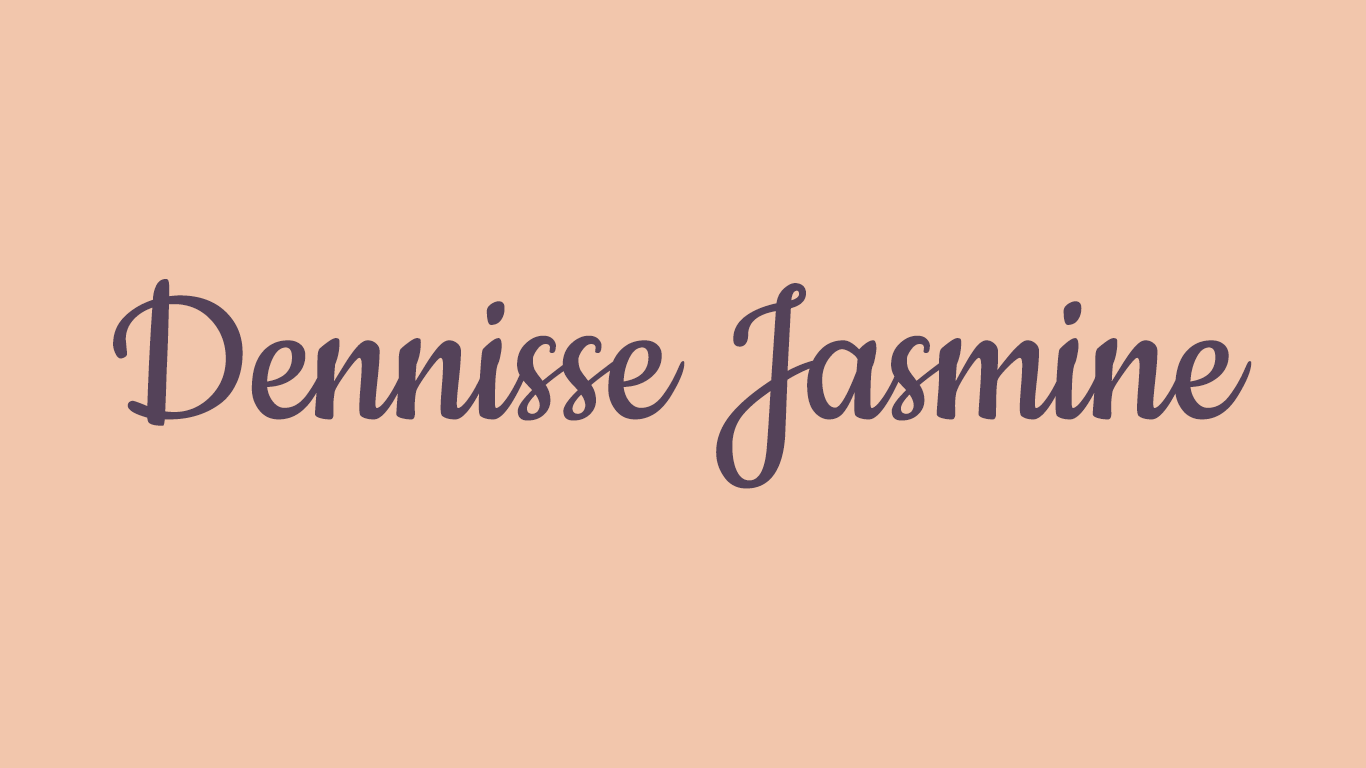
<style>
.page{position:relative;width:1366px;height:768px;background:#f2c6ac}
.page>*{position:absolute;margin:0}
.t1{font:219.2px "Cookie-Regular";color:#544259}
</style>
<div class="page">
<p class="t1" style="left:113px;top:279px;width:1139px;height:210px">Dennisse Jasmine</p>
</div>
